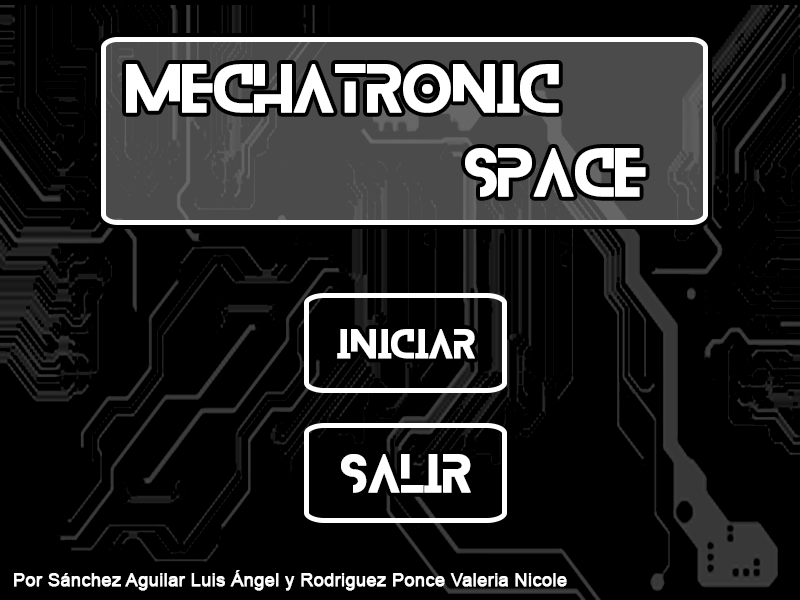
<style>
.page{position:relative;width:800px;height:600px;background:#000000}
.page>*{position:absolute;margin:0}
.t1{font:60px "Blanka-Regular";color:#ffffff;font-weight:bold}
.t2{font:36px "Blanka-Regular";color:#ffffff;font-weight:bold}
.t3{font:48px "Blanka-Regular";color:#ffffff;font-weight:bold}
.t4{font:18px "ArialMT";color:#ffffff;font-weight:bold}
</style>
<div class="page">
<p class="t1" style="left:126px;top:64px;width:433px;height:49px">mechatronic</p>
<p class="t1" style="left:465px;top:148px;width:181px;height:49px">space</p>
<p class="t2" style="left:337px;top:329px;width:138px;height:30px">INICIAR</p>
<p class="t3" style="left:341px;top:454px;width:130px;height:39px">SALIR</p>
<p class="t4" style="left:14px;top:570px;width:553px;height:21px">Por Sánchez Aguilar Luis Ángel y Rodriguez Ponce Valeria Nicole</p>
</div>
